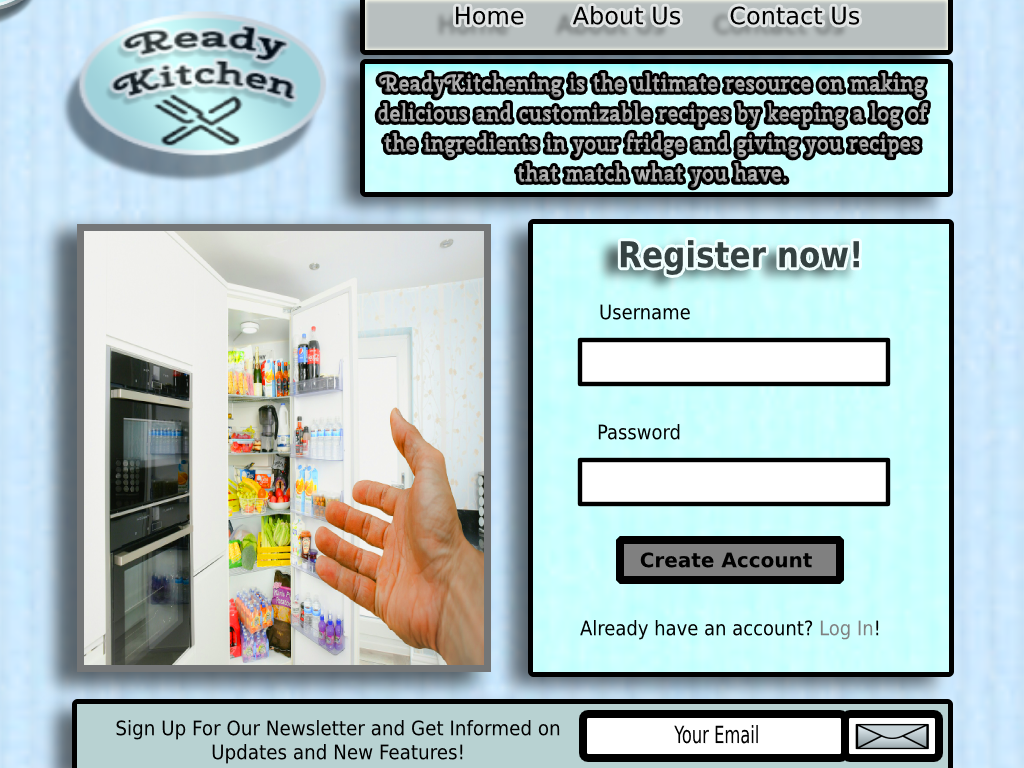
<style>
.page{position:relative;width:1024px;height:768px}
.page>*{position:absolute;margin:0}
.t1{font:24px "DejaVuSans";color:#000000}
.t2{font:35.7px "DejaVuSans-Bold";color:#354241;scale:0.87 1}
.t3{font:20px "DejaVuSansCondensed";color:#000000}
.t4{font:20px "DejaVuSans-Bold";color:#000000}
.t5{font:20px "DejaVuSansCondensed";color:#808080}
.t6{font:23.8px "DejaVuSansCondensed";color:#000000;scale:0.76 1}
</style>
<div class="page">
<p class="t1" style="left:456px;top:5px;width:404px;height:20px">Home About Us Contact Us</p>
<p class="t2" style="left:620px;top:240px;width:239px;height:35px">Register now!</p>
<p class="t3" style="left:600px;top:304px;width:90px;height:16px">Username</p>
<p class="t3" style="left:598px;top:424px;width:82px;height:16px">Password</p>
<p class="t4" style="left:640px;top:552px;width:172px;height:16px">Create Account</p>
<p class="t3" style="left:580px;top:620px;width:299px;height:20px">Already have an account? <span class="t5">Log In</span>!</p>
<p class="t3" style="left:116px;top:720px;width:444px;height:44px;text-align:center">Sign Up For Our Newsletter and Get Informed on Updates and New Features!</p>
<p class="t6" style="left:674px;top:725px;width:84px;height:19px">Your Email</p>
</div>
